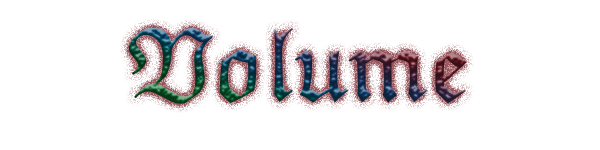
<style>
.page{position:relative;width:600px;height:150px;background:#ffffff}
.page>*{position:absolute;margin:0}
.t1{font:105px "EuclidFraktur"}
</style>
<div class="page">
<p class="t1" style="left:128px;top:27px;width:339px;height:77px">Volume</p>
</div>
